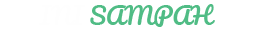
<style>
.page{position:relative;width:253px;height:29px;background:#ffffff}
.page>*{position:absolute;margin:0}
.t1{font:23.5px "Pacifico-Regular";color:#50bc85}
.t2{font:23.5px "Pacifico-Regular";color:#fefefe}
</style>
<div class="page">
<p class="t1" style="left:38px;top:4px;width:177px;height:23px"><span class="t2">INI</span> SAMPAH</p>
</div>
